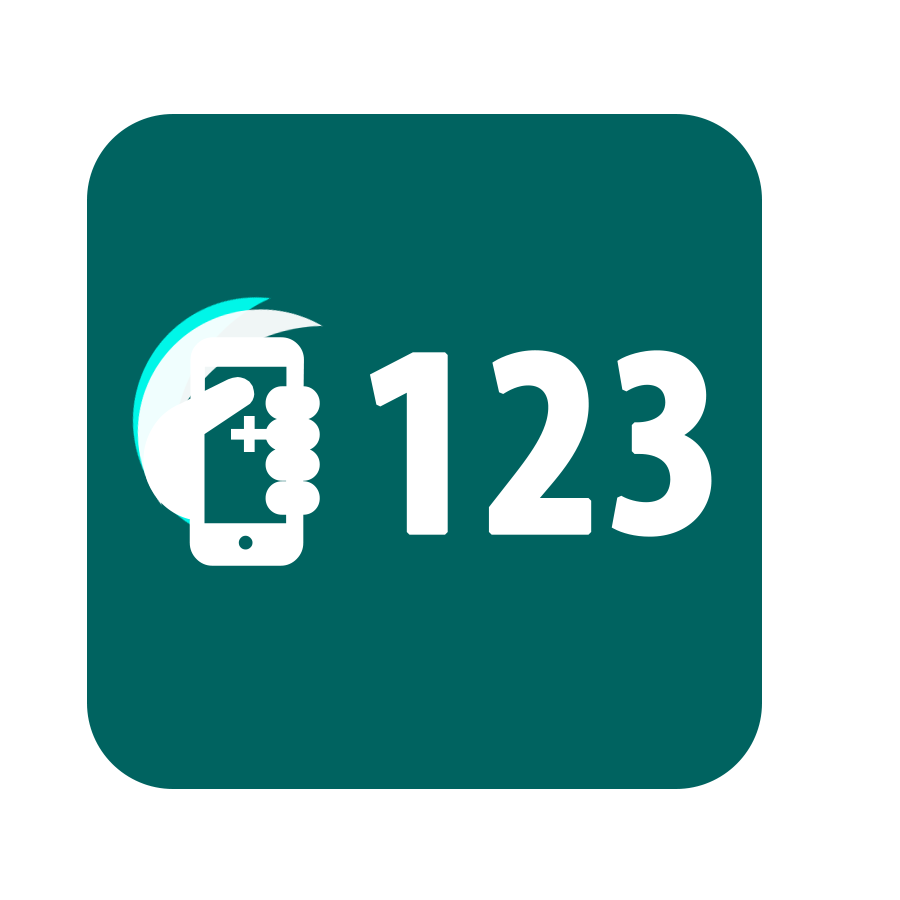
<style>
.page{position:relative;width:900px;height:900px;background:#ffffff}
.page>*{position:absolute;margin:0}
.t1{font:272.1px "MyriadPro-BoldCond";color:#ffffff;font-weight:bold}
</style>
<div class="page">
<p class="t1" style="left:370px;top:350px;width:342px;height:187px">123</p>
</div>
